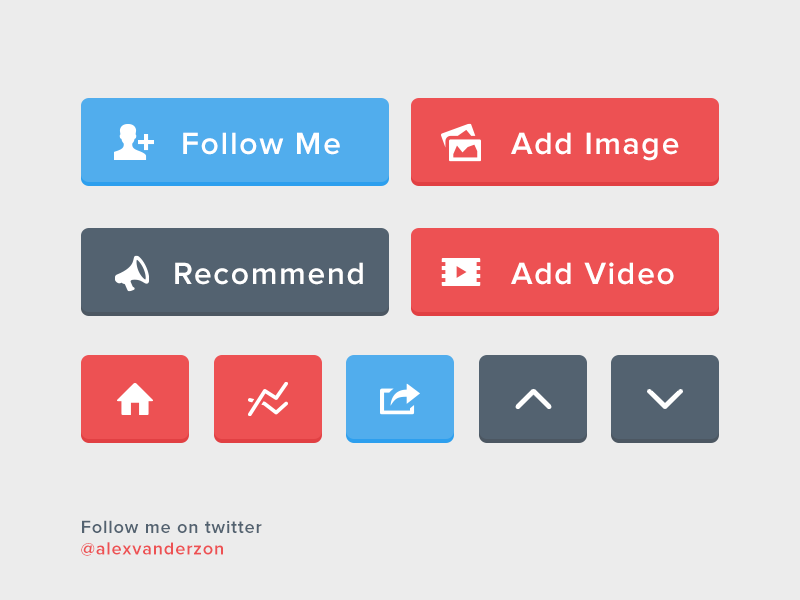
<style>
.page{position:relative;width:800px;height:600px;background:#ececec}
.page>*{position:absolute;margin:0}
.t1{font:32px "ProximaNova-Semibold";letter-spacing:0.05em;color:#ffffff}
.t2{font:18px "ProximaNova-Semibold";letter-spacing:0.05em;color:#536270}
.t3{font:18px "ProximaNova-Semibold";letter-spacing:0.05em;color:#ed5153}
</style>
<div class="page">
<p class="t1" style="left:183px;top:132px;width:157px;height:23px">Follow Me</p>
<p class="t1" style="left:511px;top:132px;width:168px;height:29px">Add Image</p>
<p class="t1" style="left:175px;top:262px;width:188px;height:23px">Recommend</p>
<p class="t1" style="left:511px;top:262px;width:163px;height:23px">Add Video</p>
<p class="t2" style="left:81px;top:520px;width:181px;height:36px">Follow me on twitter <br><span class="t3">@alexvanderzon</span></p>
</div>
